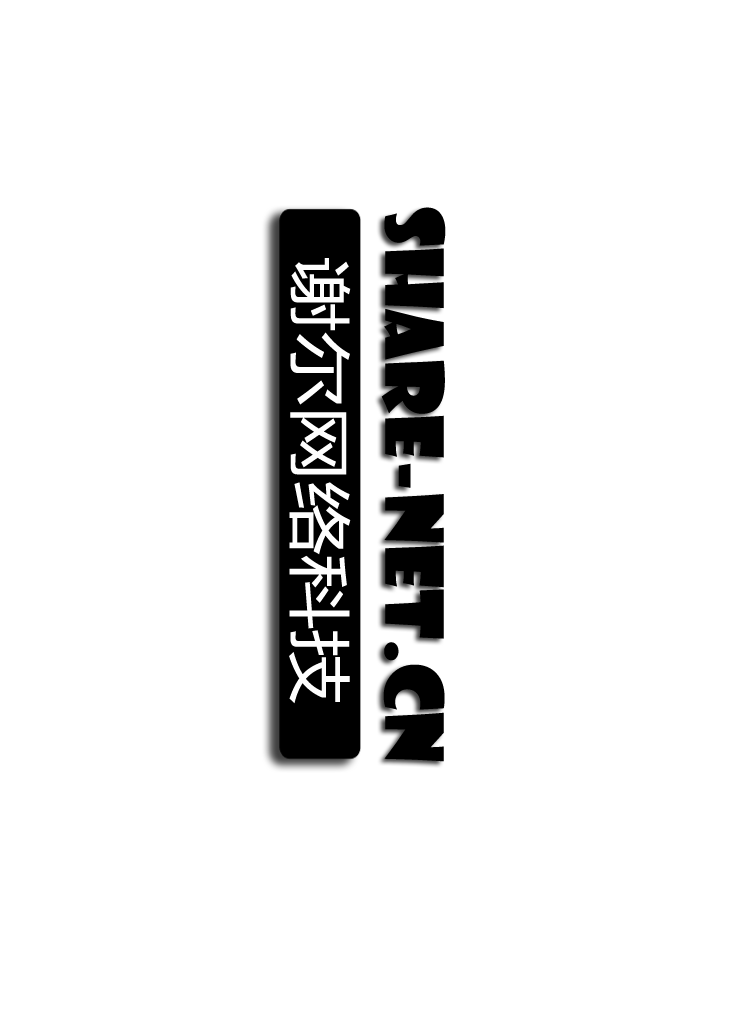
<style>
.page{position:relative;width:748px;height:1024px;background:#ffffff}
.page>*{position:absolute;margin:0}
.t1{font:77.7px "ShowcardGothic-Reg";color:#000000;scale:1.04 1}
.t2{font:62.4px "MicrosoftYaHei";color:#fefefe;scale:1.19 1}
</style>
<div class="page">
<p class="t1" style="left:381px;top:207px;width:65px;height:555px;rotate:90deg">share-net.cn</p>
<p class="t2" style="left:289px;top:258px;width:62px;height:446px;rotate:90deg">谢尔网络科技</p>
</div>
